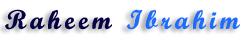
<style>
.page{position:relative;width:245px;height:42px;background:#ffffff}
.page>*{position:absolute;margin:0}
.t1{font:27px "ScriptMTBold";letter-spacing:0.15em;color:#1f6cfb}
.t2{font:27px "ScriptMTBold";letter-spacing:0.15em;color:#060344}
</style>
<div class="page">
<p class="t1" style="left:5px;top:9px;width:235px;height:21px"><span class="t2">Raheem </span>Ibrahim</p>
</div>
